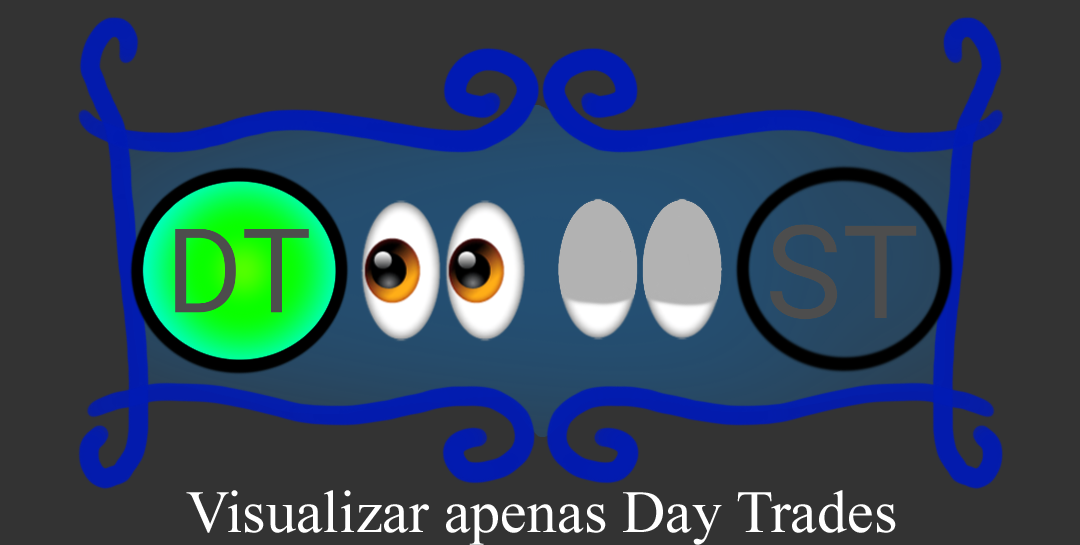
<style>
.page{position:relative;width:1080px;height:545px;background:#333333}
.page>*{position:absolute;margin:0}
.t1{font:60px "TimesNewRomanPSMT";color:#ffffff}
</style>
<div class="page">
<p class="t1" style="left:186px;top:490px;width:710px;height:55px">Visualizar apenas Day Trades</p>
</div>
